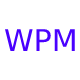
<style>
.page{position:relative;width:80px;height:80px;background:#ffffff}
.page>*{position:absolute;margin:0}
.t1{font:30px "DejaVuSans";color:#4900ff}
</style>
<div class="page">
<p class="t1" style="left:4px;top:29px;width:71px;height:22px">WPM</p>
</div>
